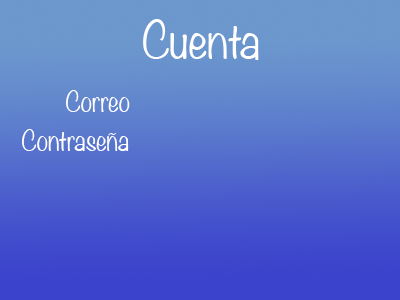
<style>
.page{position:relative;width:400px;height:300px}
.page>*{position:absolute;margin:0}
.t1{font:45.8px "Noteworthy-Light";color:#ffffff}
.t2{font:25px "Noteworthy-Light";color:#ffffff}
</style>
<div class="page">
<p class="t1" style="left:143px;top:19px;width:116px;height:41px">Cuenta</p>
<p class="t2" style="left:66px;top:90px;width:64px;height:22px">Correo</p>
<p class="t2" style="left:22px;top:129px;width:107px;height:22px">Contraseña</p>
</div>
